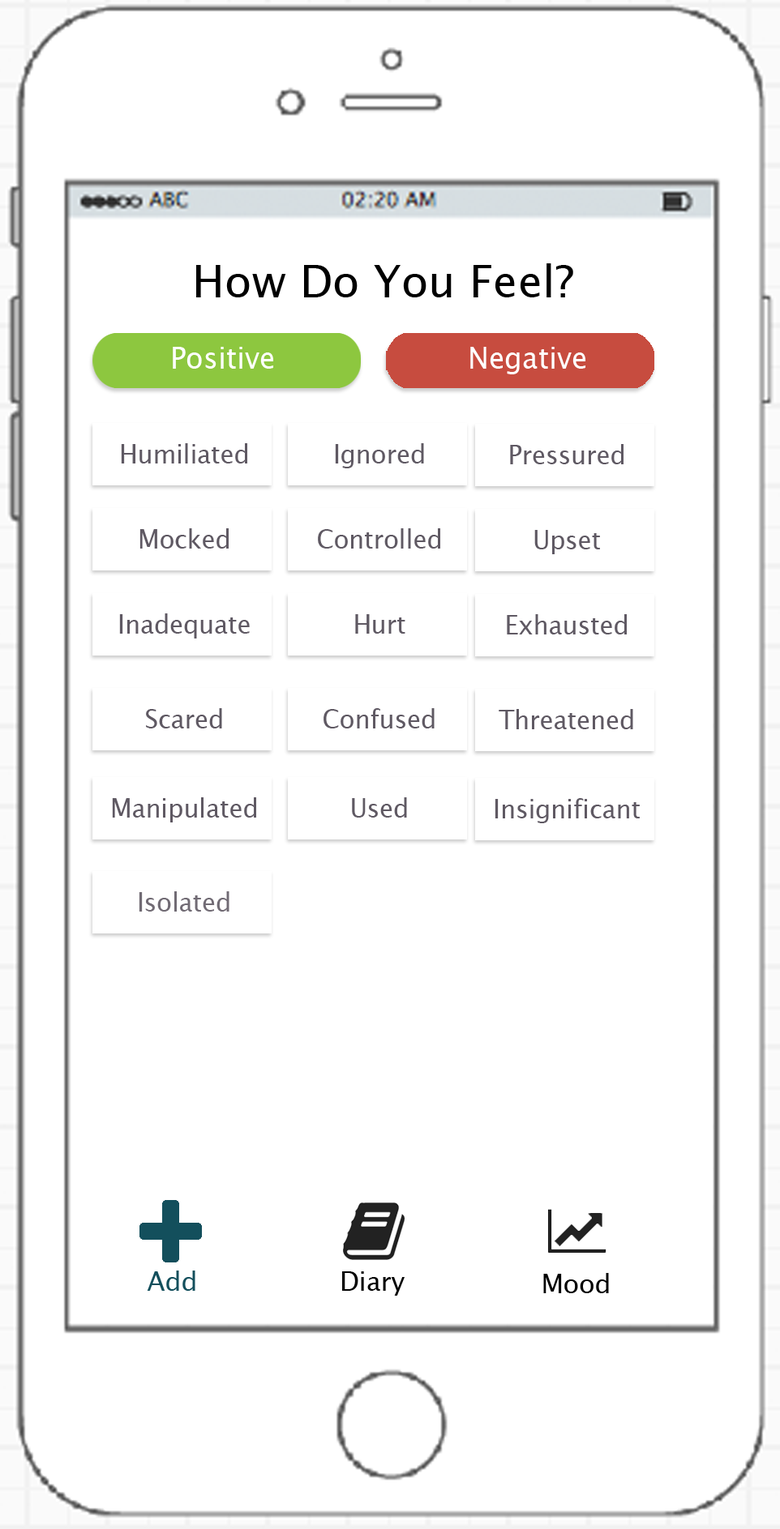
<style>
.page{position:relative;width:780px;height:1529px;background:#ffffff}
.page>*{position:absolute;margin:0}
.t1{font:44px "LucidaGrande";color:#000000}
.t2{font:29.4px "LucidaGrande";color:#ffffff;scale:0.97 1}
.t3{font:25.7px "LucidaGrande";color:#5f5963;scale:0.96 1}
.t4{font:25.7px "LucidaGrande";color:#716b74;scale:0.96 1}
.t5{font:25.7px "LucidaGrande";color:#134f5c}
.t6{font:25.7px "LucidaGrande";color:#000000}
</style>
<div class="page">
<p class="t1" style="left:196px;top:263px;width:377px;height:34px">How Do You Feel?</p>
<p class="t2" style="left:173px;top:347px;width:100px;height:22px">Positive</p>
<p class="t2" style="left:470px;top:347px;width:115px;height:27px">Negative</p>
<p class="t3" style="left:121px;top:443px;width:126px;height:21px">Humiliated</p>
<p class="t3" style="left:335px;top:443px;width:89px;height:25px">Ignored</p>
<p class="t3" style="left:510px;top:444px;width:113px;height:20px">Pressured</p>
<p class="t3" style="left:139px;top:528px;width:90px;height:21px">Mocked</p>
<p class="t3" style="left:318px;top:528px;width:122px;height:21px">Controlled</p>
<p class="t3" style="left:534px;top:530px;width:66px;height:24px">Upset</p>
<p class="t3" style="left:119px;top:614px;width:131px;height:25px">Inadequate</p>
<p class="t3" style="left:355px;top:614px;width:50px;height:20px">Hurt</p>
<p class="t3" style="left:507px;top:614px;width:120px;height:21px">Exhausted</p>
<p class="t3" style="left:146px;top:708px;width:76px;height:21px">Scared</p>
<p class="t3" style="left:323px;top:708px;width:111px;height:21px">Confused</p>
<p class="t3" style="left:498px;top:709px;width:135px;height:20px">Threatened</p>
<p class="t3" style="left:112px;top:798px;width:144px;height:25px">Manipulated</p>
<p class="t3" style="left:352px;top:798px;width:55px;height:20px">Used</p>
<p class="t3" style="left:494px;top:798px;width:145px;height:25px">Insignificant</p>
<p class="t4" style="left:139px;top:892px;width:90px;height:20px">Isolated</p>
<p class="t5" style="left:147px;top:1271px;width:48px;height:20px">Add</p>
<p class="t6" style="left:342px;top:1272px;width:62px;height:24px">Diary</p>
<p class="t6" style="left:543px;top:1273px;width:66px;height:21px">Mood</p>
</div>
